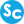
<style>
.page{position:relative;width:24px;height:24px;background:#14a6e2}
.page>*{position:absolute;margin:0}
.t1{font:16.7px "CenturyGothic-Bold";color:#ffffff}
</style>
<div class="page">
<p class="t1" style="left:3px;top:3px;width:8px;height:14px">S</p>
<p class="t1" style="left:12px;top:9px;width:10px;height:10px">c</p>
</div>
